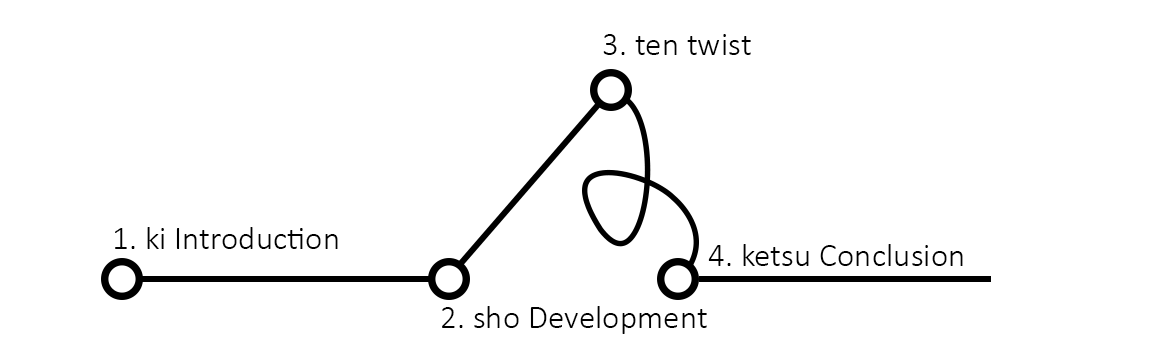
<style>
.page{position:relative;width:1164px;height:345px;background:#ffffff}
.page>*{position:absolute;margin:0}
.t1{font:33.3px "Calibri-Light";color:#000000}
</style>
<div class="page">
<p class="t1" style="left:603px;top:34px;width:148px;height:21px">3. ten twist</p>
<p class="t1" style="left:115px;top:227px;width:223px;height:22px">1. ki Introduction</p>
<p class="t1" style="left:708px;top:244px;width:255px;height:22px">4. ketsu Conclusion</p>
<p class="t1" style="left:442px;top:306px;width:265px;height:28px">2. sho Development</p>
</div>
